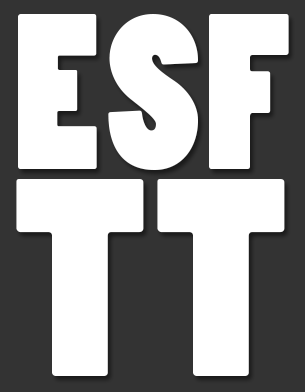
<style>
.page{position:relative;width:305px;height:392px;background:#ffffff}
.page>*{position:absolute;margin:0}
.t1{font:206.9px "PoplarStd";letter-spacing:0.02em;color:#ffffff}
.t2{font:262.7px "PoplarStd";letter-spacing:0.02em;color:#ffffff;scale:1.07 1}
</style>
<div class="page">
<p class="t1" style="left:18px;top:14px;width:271px;height:156px">ESF</p>
<p class="t2" style="left:16px;top:179px;width:269px;height:197px">TT</p>
</div>
